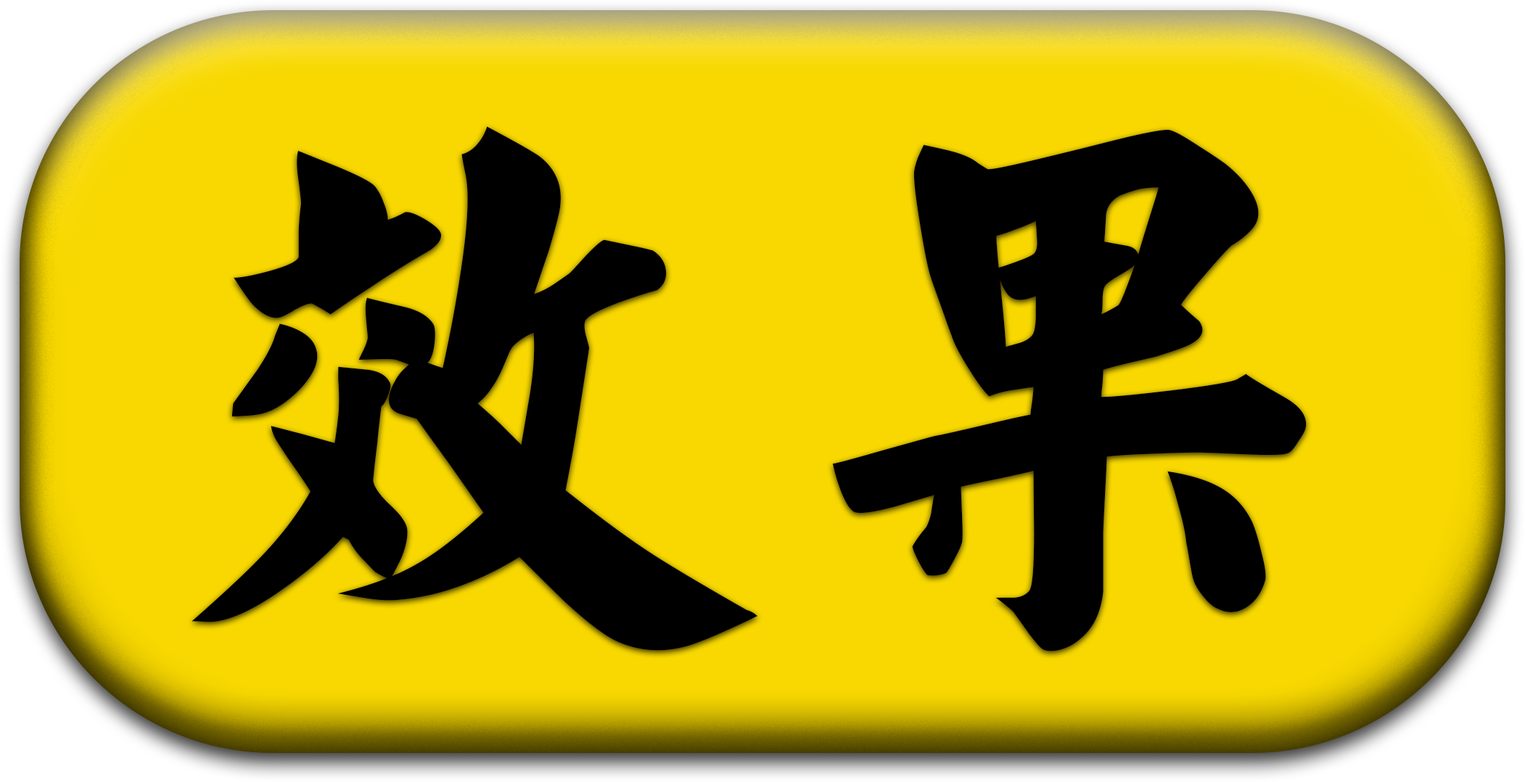
<style>
.page{position:relative;width:1525px;height:782px;background:#f8d800}
.page>*{position:absolute;margin:0}
.t1{font:604.5px "¾­µä·±Ã«¿¬ Regular";color:#000000}
</style>
<div class="page">
<p class="t1" style="left:192px;top:126px;width:1114px;height:525px">效果</p>
</div>
